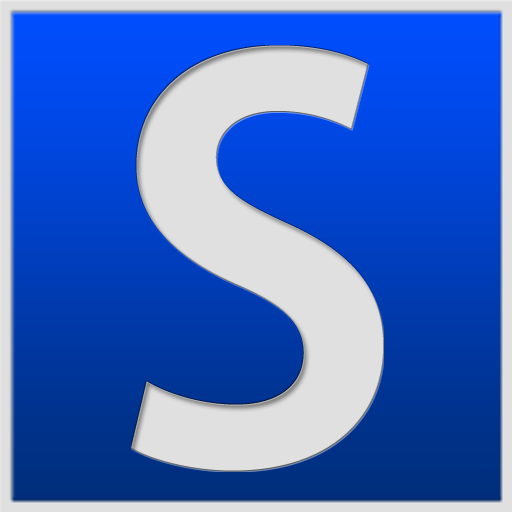
<style>
.page{position:relative;width:512px;height:512px;background:#e0e0e0}
.page>*{position:absolute;margin:0}
.t1{font:539.1px "AdobeGothicStd-Bold";color:#e0e0e0}
</style>
<div class="page">
<p class="t1" style="left:131px;top:45px;width:253px;height:427px">S</p>
</div>
